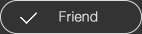
<style>
.page{position:relative;width:142px;height:34px;background:#333333}
.page>*{position:absolute;margin:0}
.t1{font:14px "HelveticaNeue-Light";letter-spacing:-0.001em;color:#dcdcdc;font-weight:bold}
</style>
<div class="page">
<p class="t1" style="left:59px;top:11px;width:39px;height:11px">Friend</p>
</div>
